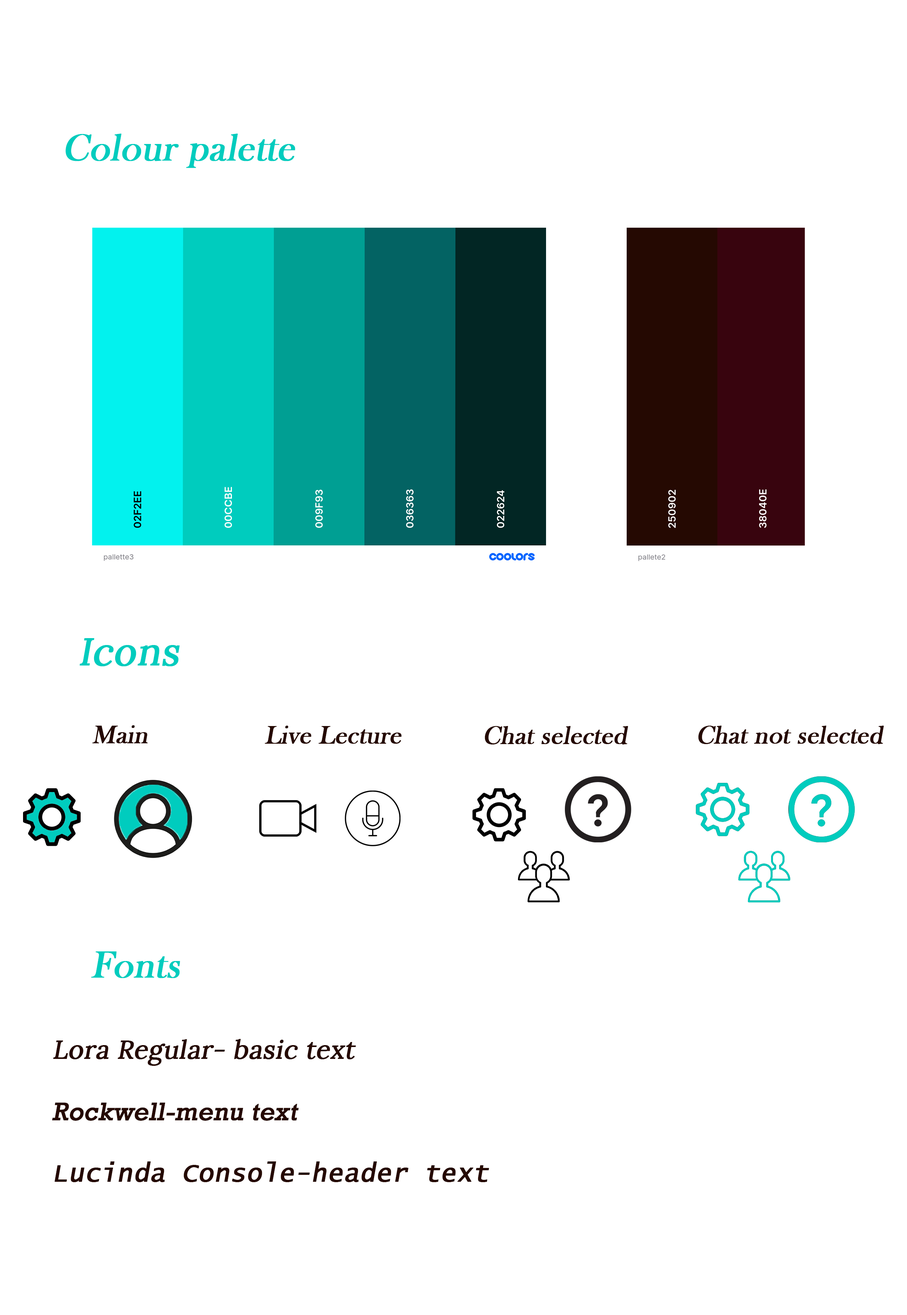
<style>
.page{position:relative;width:907px;height:1315px;background:#ffffff}
.page>*{position:absolute;margin:0}
.t1{font:38.4px "BaskOldFace";color:#00ccbe;font-weight:bold;font-style:italic}
.t2{font:38.4px "Lora-Regular";color:#00ccbe;font-weight:bold;font-style:italic}
.t3{font:25.6px "BaskOldFace";color:#250902;font-weight:bold;font-style:italic}
.t4{font:25.6px "LucidaConsole";color:#250902;font-weight:bold;font-style:italic}
.t5{font:25.6px "Lora-Regular";color:#250902;font-weight:bold;font-style:italic}
.t6{font:25.6px "Rockwell";color:#250902;font-weight:bold;font-style:italic}
</style>
<div class="page">
<p class="t1" style="left:65px;top:134px;width:230px;height:34px">Colour palette</p>
<p class="t2" style="left:79px;top:638px;width:101px;height:28px">Icons</p>
<p class="t3" style="left:92px;top:725px;width:56px;height:18px">Main</p>
<p class="t3" style="left:265px;top:726px;width:137px;height:18px">Live Lecture</p>
<p class="t3" style="left:698px;top:726px;width:186px;height:18px">Chat not selected</p>
<p class="t3" style="left:485px;top:726px;width:143px;height:18px">Chat selected</p>
<p class="t1" style="left:91px;top:951px;width:89px;height:27px">Fonts</p>
<p class="t4" style="left:52px;top:1039px;width:437px;height:143px"><span class="t5">Lora Regular- basic text                        <br></span><span class="t6"><br>Rockwell-menu text    <br><br></span>Lucinda Console-header text</p>
</div>
